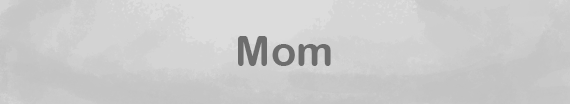
<style>
.page{position:relative;width:570px;height:104px}
.page>*{position:absolute;margin:0}
.t1{font:42.1px "ArialRoundedMTBold";color:#6d6d6d}
</style>
<div class="page">
<p class="t1" style="left:238px;top:36px;width:93px;height:30px">Mom</p>
</div>
